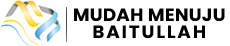
<style>
.page{position:relative;width:230px;height:46px;background:#ffffff}
.page>*{position:absolute;margin:0}
.t1{font:17.9px "Poppins-Bold";letter-spacing:0.01em;color:#000000}
.t2{font:17.9px "Poppins-Bold";letter-spacing:0.1em;color:#000000}
</style>
<div class="page">
<p class="t1" style="left:74px;top:8px;width:151px;height:13px">MUDAH MENUJU</p>
<p class="t2" style="left:93px;top:25px;width:112px;height:13px">BAITULLAH</p>
</div>
